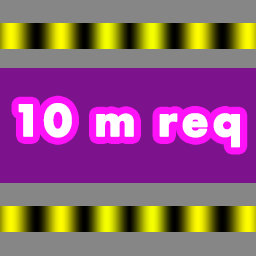
<style>
.page{position:relative;width:256px;height:256px;background:#868686}
.page>*{position:absolute;margin:0}
.t1{font:41.7px "Futura-Bold";letter-spacing:0.07em;color:#ffffff;font-weight:bold}
</style>
<div class="page">
<p class="t1" style="left:18px;top:103px;width:222px;height:45px">10 m req</p>
</div>
